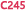
<style>
.page{position:relative;width:26px;height:11px;background:#ffffff}
.page>*{position:absolute;margin:0}
.t1{font:10px "MicrosoftYaHei";color:#db3156;font-weight:bold}
</style>
<div class="page">
<p class="t1" style="left:0px;top:1px;width:25px;height:9px">C245</p>
</div>
